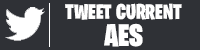
<style>
.page{position:relative;width:200px;height:50px;background:#2f3136}
.page>*{position:absolute;margin:0}
.t1{font:21.3px "BurbankBigCondensed-Black";color:#ffffff}
.t2{font:31.2px "BurbankBigCondensed-Black";color:#ffffff}
</style>
<div class="page">
<p class="t1" style="left:65px;top:3px;width:117px;height:17px">TWEET CURRENT</p>
<p class="t2" style="left:104px;top:23px;width:39px;height:24px">AES</p>
</div>
